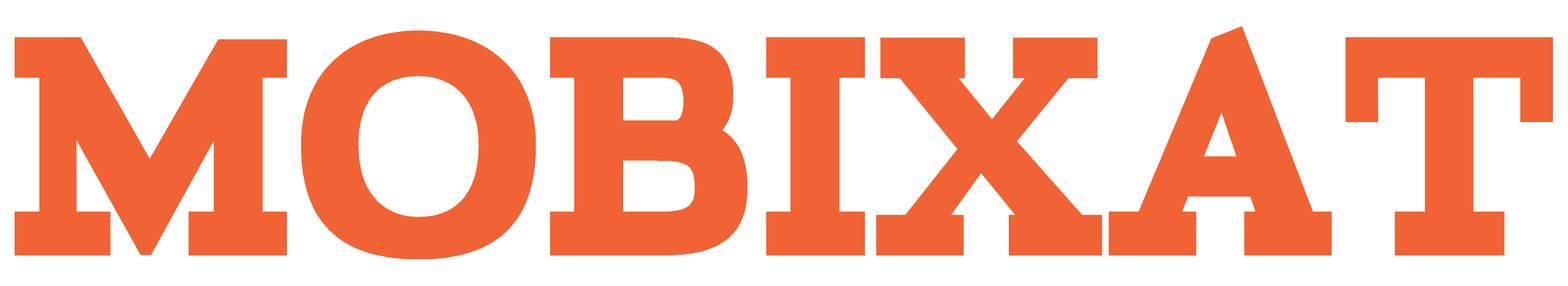
<style>
.page{position:relative;width:1568px;height:286px;background:#ffffff}
.page>*{position:absolute;margin:0}
.t1{font:352.6px "Acknowledgement";color:#f16334;scale:0.67 1}
</style>
<div class="page">
<p class="t1" style="left:15px;top:26px;width:1538px;height:234px">MOBIXAT</p>
</div>
